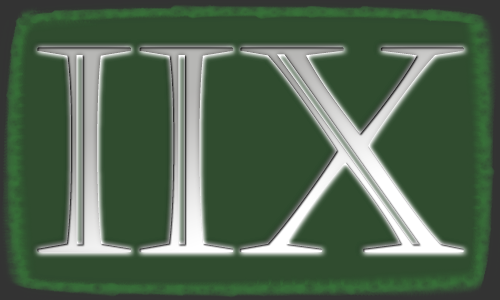
<style>
.page{position:relative;width:500px;height:300px;background:#304c2f}
.page>*{position:absolute;margin:0}
.t1{font:283.6px "Castellar";font-weight:bold;scale:0.88 1}
</style>
<div class="page">
<p class="t1" style="left:37px;top:47px;width:427px;height:206px">IIX</p>
</div>
